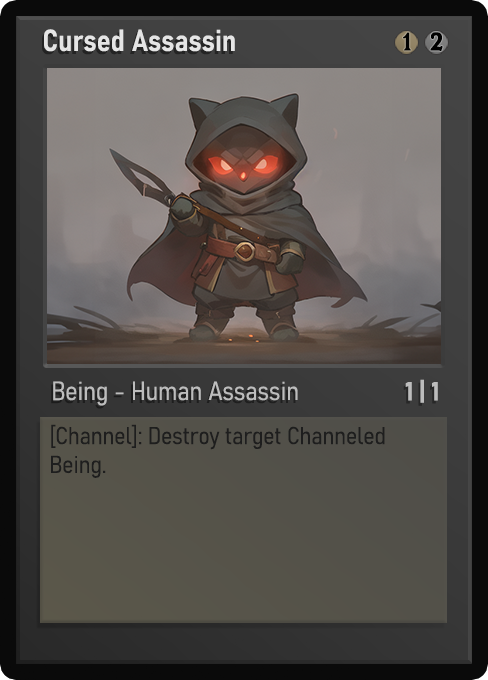
<style>
.page{position:relative;width:488px;height:680px}
.page>*{position:absolute;margin:0}
.t1{font:30px "Bahnschrift-SemiBoldSemiCondensed";color:#f2f2f2;font-weight:bold}
.t2{font:25px "WTRRoycroft";color:#000000;font-weight:bold;scale:1.09 1}
.t3{font:26px "Bahnschrift-LightSemiCondensed";color:#c8c8c8;font-weight:bold}
.t4{font:26px "Bahnschrift-BoldSemiCondensed";color:#bdbdbd;font-weight:bold}
.t5{font:24px "Bahnschrift-LightSemiCondensed";color:#1e1e1e;font-weight:bold}
</style>
<div class="page">
<p class="t1" style="left:44px;top:29px;width:191px;height:23px;opacity:0.9">Cursed Assassin</p>
<p class="t2" style="left:403px;top:32px;width:8px;height:19px">1</p>
<p class="t2" style="left:430px;top:32px;width:13px;height:19px">2</p>
<p class="t3" style="left:53px;top:381px;width:245px;height:25px;opacity:0.9">Being - Human Assassin</p>
<p class="t4" style="left:405px;top:379px;width:33px;height:24px">1 | 1</p>
<p class="t5" style="left:51px;top:424px;width:334px;height:54px">[Channel]: Destroy target Channeled Being.</p>
</div>
